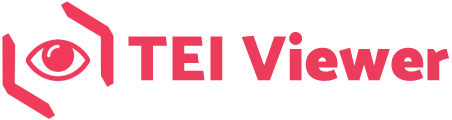
<style>
.page{position:relative;width:452px;height:120px;background:#ffffff}
.page>*{position:absolute;margin:0}
.t1{font:64px "Catamaran-Black";color:#eb3d5b}
</style>
<div class="page">
<p class="t1" style="left:128px;top:32px;width:321px;height:49px">TEI Viewer</p>
</div>
